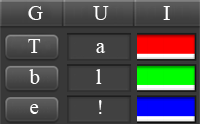
<style>
.page{position:relative;width:200px;height:124px}
.page>*{position:absolute;margin:0}
.t1{font:20.8px "TimesNewRomanPSMT";color:#ffffff}
</style>
<div class="page">
<p class="t1" style="left:28px;top:6px;width:15px;height:14px">G</p>
<p class="t1" style="left:93px;top:6px;width:16px;height:14px">U</p>
<p class="t1" style="left:163px;top:6px;width:7px;height:14px">I</p>
<p class="t1" style="left:28px;top:39px;width:13px;height:14px">T</p>
<p class="t1" style="left:96px;top:43px;width:10px;height:10px">a</p>
<p class="t1" style="left:29px;top:69px;width:11px;height:15px">b</p>
<p class="t1" style="left:96px;top:69px;width:6px;height:15px">l</p>
<p class="t1" style="left:99px;top:100px;width:3px;height:14px">!</p>
<p class="t1" style="left:30px;top:104px;width:9px;height:10px">e</p>
</div>
